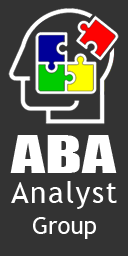
<style>
.page{position:relative;width:128px;height:256px;background:#333333}
.page>*{position:absolute;margin:0}
.t1{font:48px "Impact";color:#ffffff;scale:1.4 1}
.t2{font:30px "TrebuchetMS";letter-spacing:0.05em;color:#ffffff}
.t3{font:24px "TrebuchetMS";color:#ffffff}
</style>
<div class="page">
<p class="t1" style="left:10px;top:135px;width:107px;height:38px">ABA</p>
<p class="t2" style="left:11px;top:181px;width:106px;height:28px">Analyst</p>
<p class="t3" style="left:33px;top:217px;width:63px;height:22px">Group</p>
</div>
